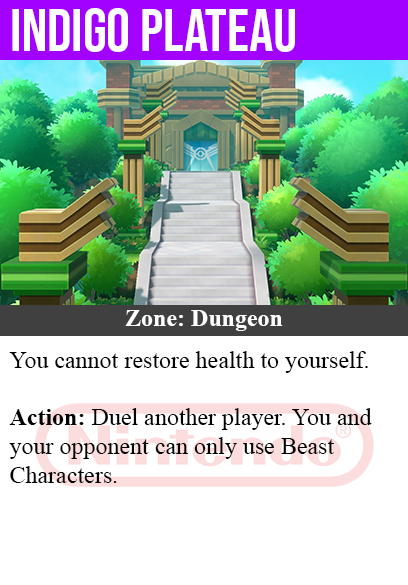
<style>
.page{position:relative;width:408px;height:585px;background:#ffffff}
.page>*{position:absolute;margin:0}
.t1{font:60px "BebasNeue-Regular";color:#ffffff}
.t2{font:24px "TimesNewRomanPS-BoldMT";color:#ffffff}
.t3{font:24px "TimesNewRomanPSMT";color:#000000}
.t4{font:24px "TimesNewRomanPS-BoldMT";color:#000000}
</style>
<div class="page">
<p class="t1" style="left:12px;top:8px;width:283px;height:44px">indigo plateau</p>
<p class="t2" style="left:125px;top:310px;width:158px;height:21px">Zone: Dungeon</p>
<p class="t3" style="left:9px;top:351px;width:363px;height:132px">You cannot restore health to yourself.<br><br><span class="t4">Action:</span> Duel another player. You and<br>your opponent can only use Beast<br>Characters.</p>
</div>
